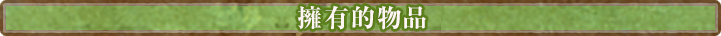
<style>
.page{position:relative;width:721px;height:36px}
.page>*{position:absolute;margin:0}
.t1{font:25px "RyuminPro-ExBold";letter-spacing:0.075em;color:#fff6f3}
</style>
<div class="page">
<p class="t1" style="left:297px;top:5px;width:129px;height:25px">擁有的物品</p>
</div>
